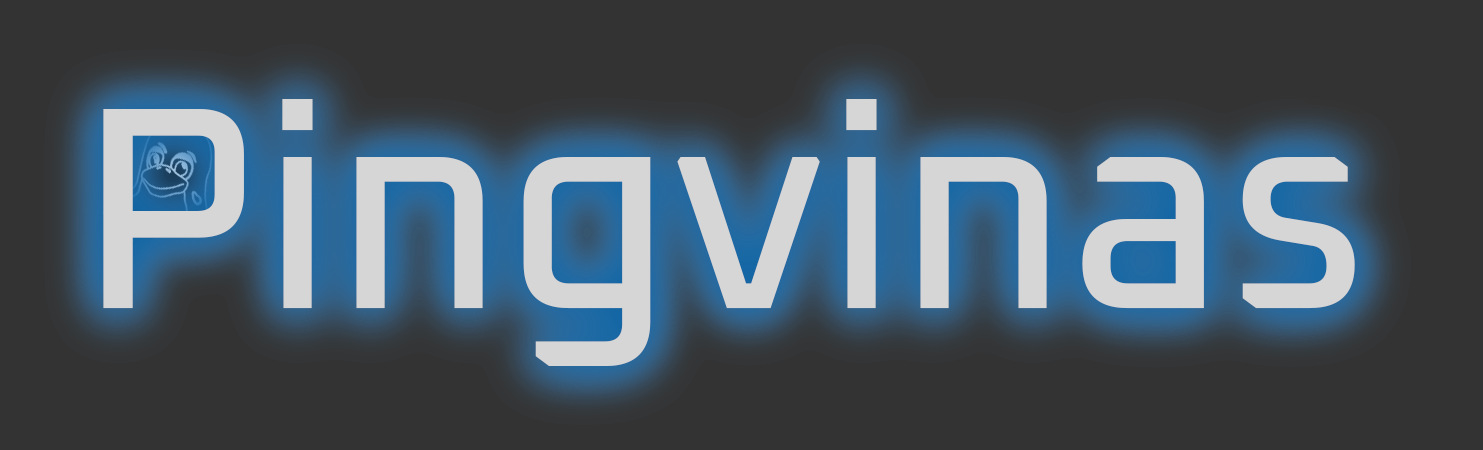
<style>
.page{position:relative;width:1483px;height:450px;background:#333333}
.page>*{position:absolute;margin:0}
.t1{font:289.1px "OxaniumRoman-Medium";color:#d6d6d6}
</style>
<div class="page">
<p class="t1" style="left:103px;top:99px;width:1252px;height:267px">Pingvinas</p>
</div>
